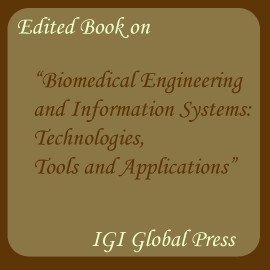
<style>
.page{position:relative;width:270px;height:270px;background:#8b7645}
.page>*{position:absolute;margin:0}
.t1{font:24px "MonotypeCorsiva";color:#ecfec9}
.t2{font:24px "MonotypeCorsiva";color:#5d3506}
</style>
<div class="page">
<p class="t1" style="left:18px;top:17px;width:133px;height:21px">Edited Book on</p>
<p class="t2" style="left:34px;top:70px;width:218px;height:110px">“Biomedical Engineering <br>and Information Systems: <br>Technologies, <br>Tools and Applications”</p>
<p class="t1" style="left:92px;top:229px;width:144px;height:24px">IGI Global Press</p>
</div>
